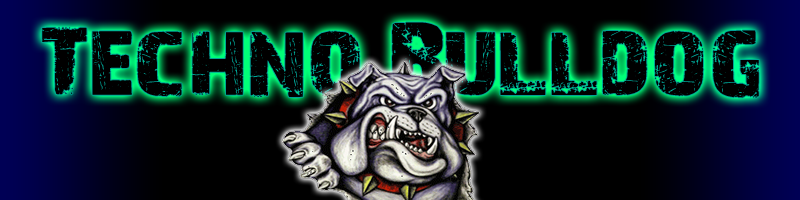
<style>
.page{position:relative;width:800px;height:200px;background:#000000}
.page>*{position:absolute;margin:0}
.t1{font:94.9px "28-Days-Later-Regular";color:#000000;scale:1.18 1}
</style>
<div class="page">
<p class="t1" style="left:42px;top:22px;width:717px;height:76px">Techno Bulldog</p>
</div>
